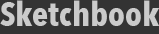
<style>
.page{position:relative;width:159px;height:34px;background:#333333}
.page>*{position:absolute;margin:0}
.t1{font:34.3px "AvenirNextCondensed-Bold";color:#cbcbcb}
</style>
<div class="page">
<p class="t1" style="left:0px;top:0px;width:160px;height:26px">Sketchbook</p>
</div>
